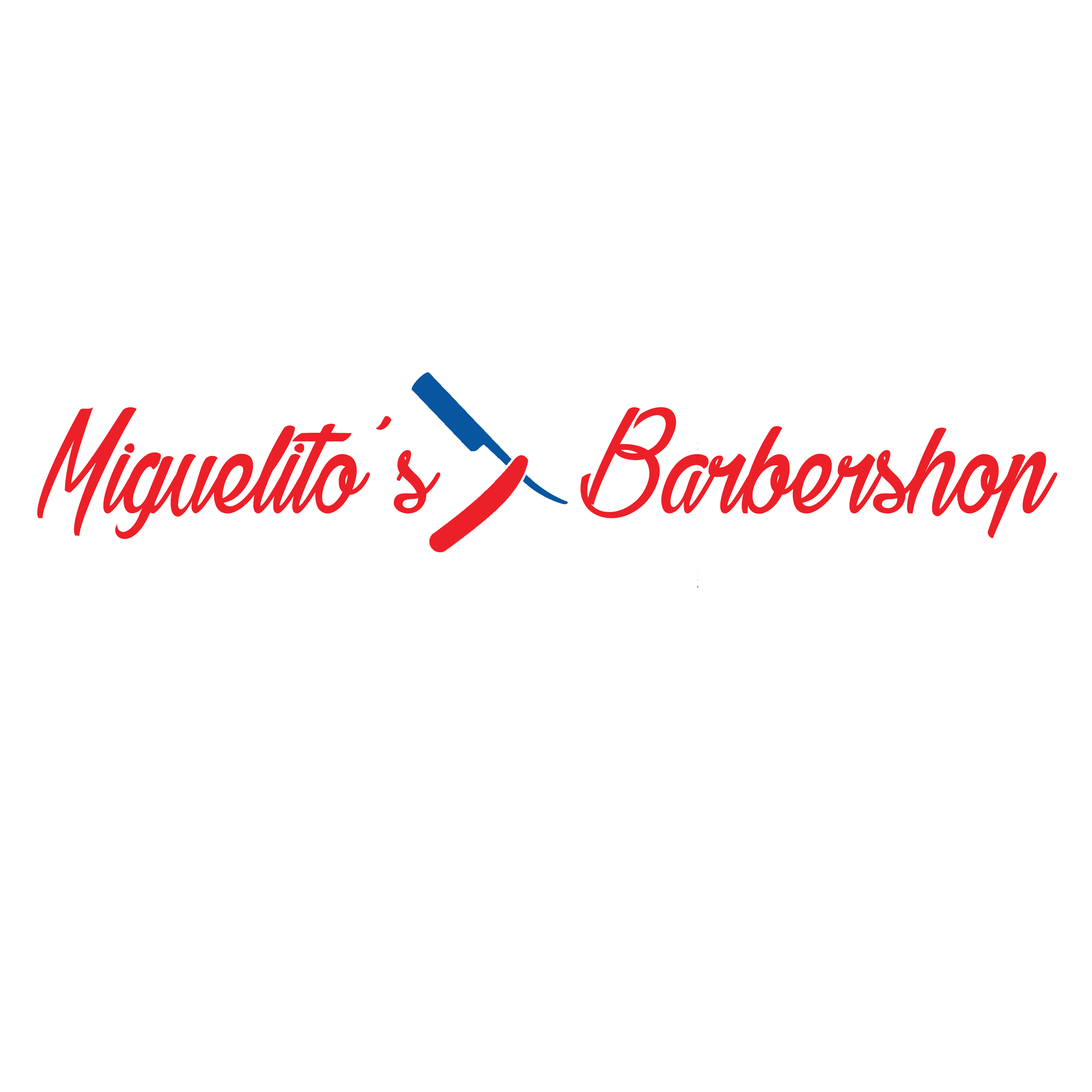
<style>
.page{position:relative;width:1092px;height:1092px;background:#ffffff}
.page>*{position:absolute;margin:0}
.t1{font:151.7px "Gillie&Hilda";color:#ec2028}
</style>
<div class="page">
<p class="t1" style="left:37px;top:407px;width:1020px;height:132px">Miguelito’s    Barbershop</p>
</div>
